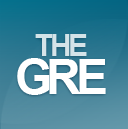
<style>
.page{position:relative;width:128px;height:129px}
.page>*{position:absolute;margin:0}
.t1{font:30px "Arial-BoldMT";letter-spacing:-0.12em;color:#d4e3e8}
.t2{font:48px "Arial-BoldMT";letter-spacing:-0.1em;color:#ffffff}
.t3{font:48px "Arial-BoldMT";letter-spacing:-0.12em;color:#ffffff}
</style>
<div class="page">
<p class="t1" style="left:35px;top:34px;width:52px;height:22px">THE</p>
<p class="t2" style="left:17px;top:58px;width:89px;height:37px"><span class="t3">G</span>RE</p>
</div>
